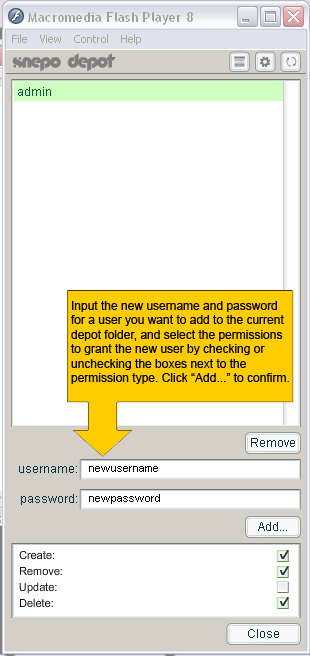
<style>
.page{position:relative;width:310px;height:656px;background:#ffffff}
.page>*{position:absolute;margin:0}
.t1{font:12px "ArialMT";color:#000000}
</style>
<div class="page">
<p class="t1" style="left:71px;top:301px;width:218px;height:83px">Input the new username and password<br>for a user you want to add to the current<br>depot folder, and select the permissions<br>to grant the new user by checking or <br>unchecking the boxes next to the<br>permission type. Click “Add...” to confirm.</p>
</div>
